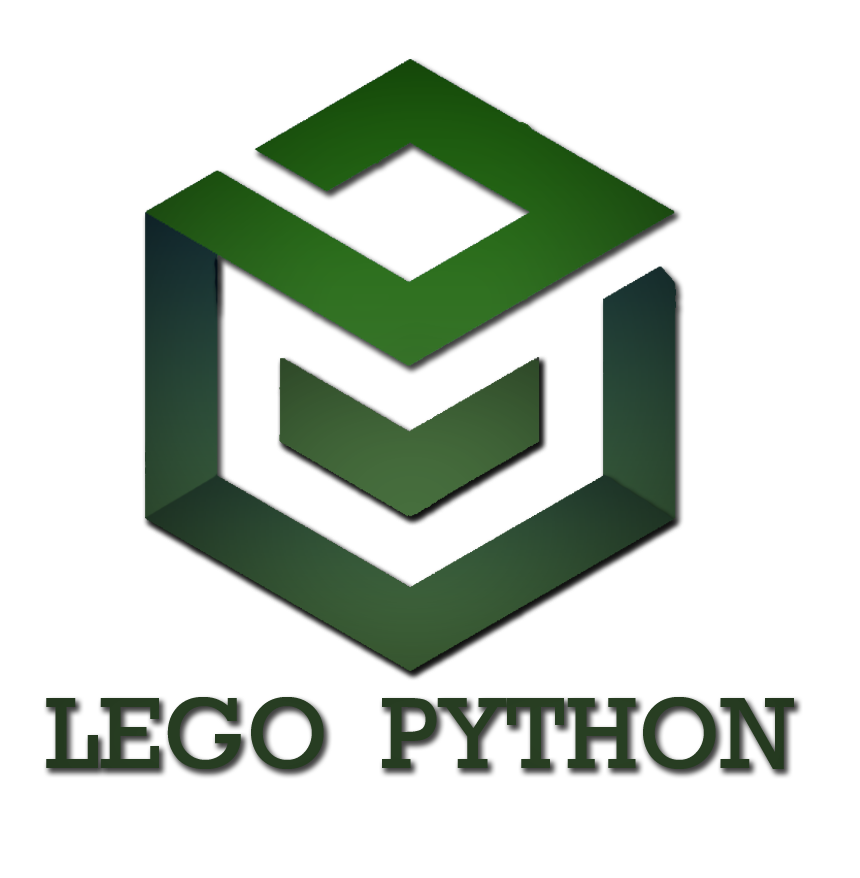
<style>
.page{position:relative;width:860px;height:878px;background:#ffffff}
.page>*{position:absolute;margin:0}
.t1{font:103.1px "Rockwell";color:#273d22}
</style>
<div class="page">
<p class="t1" style="left:46px;top:697px;width:748px;height:72px">LEGO  PYTHON</p>
</div>
